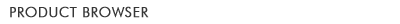
<style>
.page{position:relative;width:400px;height:24px;background:#ffffff}
.page>*{position:absolute;margin:0}
.t1{font:14px "FuturaBT-Light";letter-spacing:0.025em;color:#363636;text-transform:uppercase;font-weight:bold}
</style>
<div class="page">
<p class="t1" style="left:10px;top:6px;width:139px;height:12px">product browser</p>
</div>
